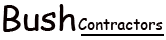
<style>
.page{position:relative;width:166px;height:40px;background:#ffffff}
.page>*{position:absolute;margin:0}
.t1{font:33.6px "ComicSansMS";color:#090000;scale:1.04 1}
.t2{font:15.9px "ComicSansMS";color:#090000;scale:0.95 1}
</style>
<div class="page">
<p class="t1" style="left:3px;top:4px;width:73px;height:28px">Bush</p>
<p class="t2" style="left:78px;top:18px;width:85px;height:12px">Contractors</p>
</div>
